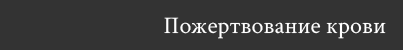
<style>
.page{position:relative;width:403px;height:50px;background:#333333}
.page>*{position:absolute;margin:0}
.t1{font:24px "CrimsonText-Regular";color:#ffffff}
</style>
<div class="page">
<p class="t1" style="left:164px;top:17px;width:222px;height:22px">Пожертвование крови</p>
</div>
